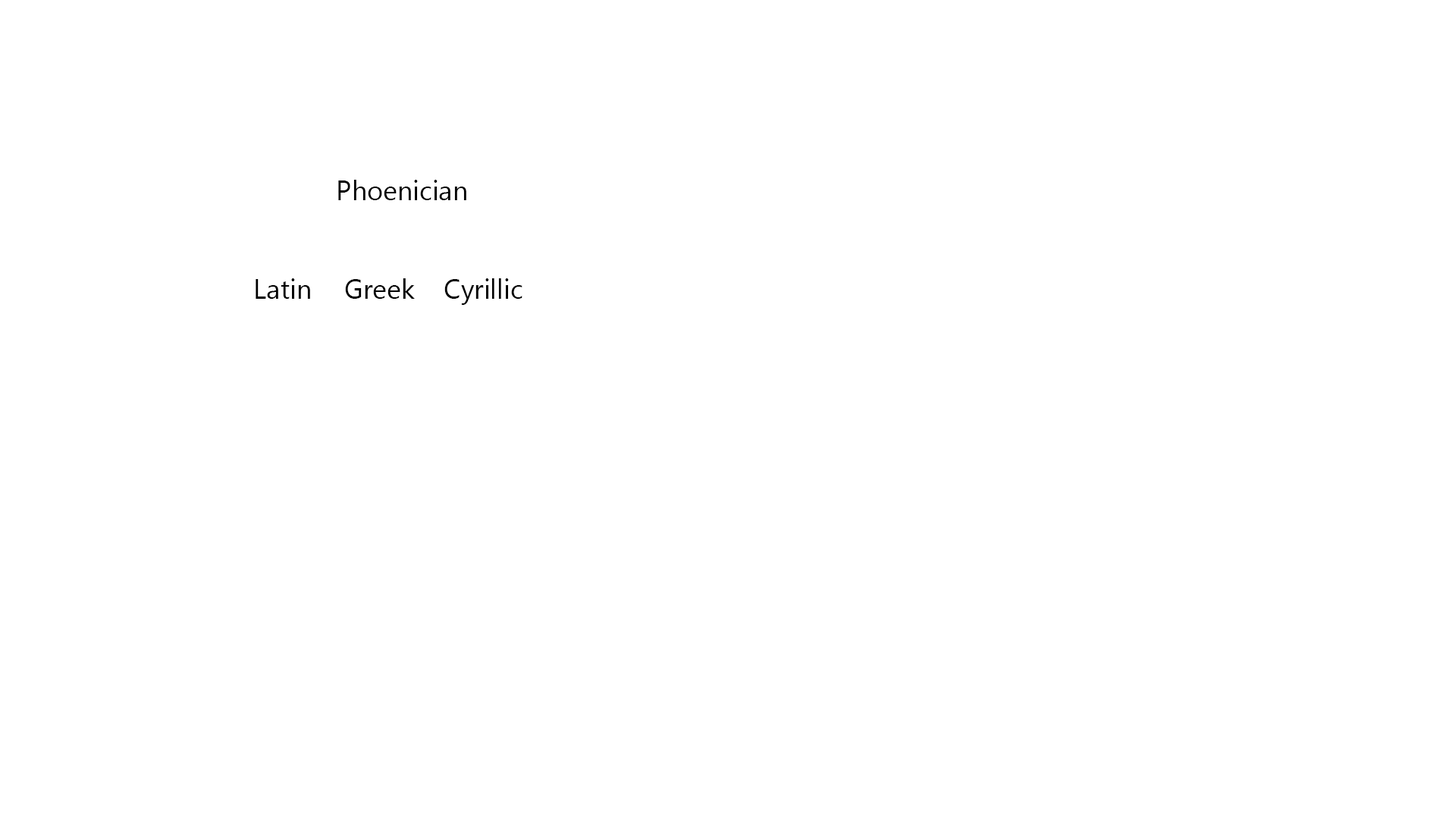
<style>
.page{position:relative;width:1456px;height:819px;background:#ffffff}
.page>*{position:absolute;margin:0}
.t1{font:27.3px "SegoeUIHistoric";color:#000000}
</style>
<div class="page">
<p class="t1" style="left:338px;top:180px;width:128px;height:20px">Phoenician</p>
<p class="t1" style="left:256px;top:278px;width:54px;height:21px">Latin</p>
<p class="t1" style="left:345px;top:278px;width:70px;height:21px">Greek</p>
<p class="t1" style="left:444px;top:278px;width:78px;height:27px">Cyrillic</p>
</div>
